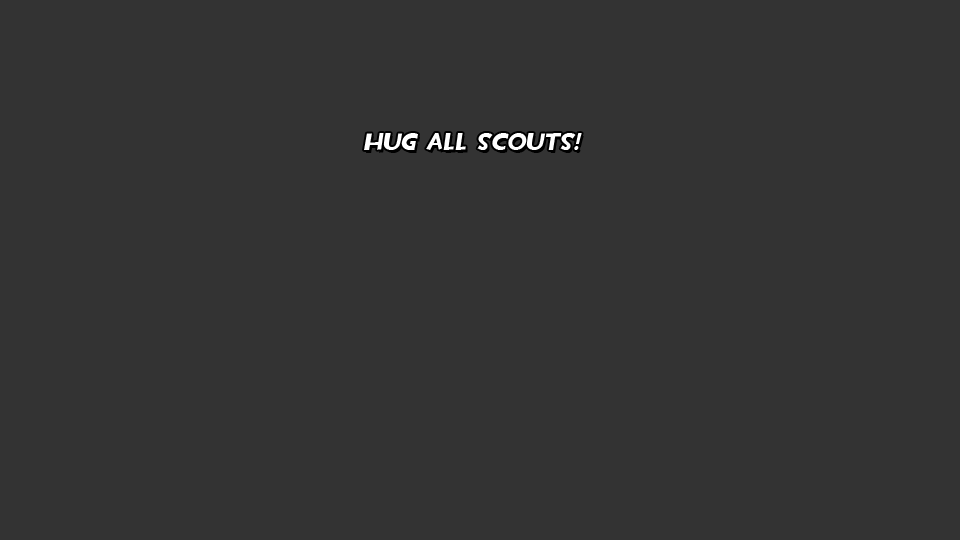
<style>
.page{position:relative;width:960px;height:540px;background:#333333}
.page>*{position:absolute;margin:0}
.t1{font:24px "TF2Build";color:#ffffff;font-style:italic}
</style>
<div class="page">
<p class="t1" style="left:364px;top:133px;width:218px;height:17px">HUG ALL SCOUTS!</p>
</div>
